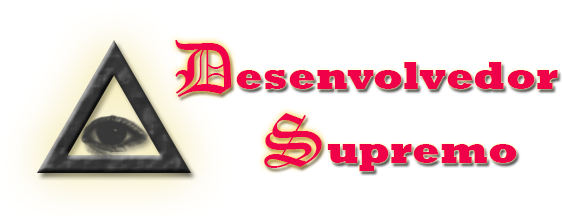
<style>
.page{position:relative;width:562px;height:221px;background:#ffffff}
.page>*{position:absolute;margin:0}
.t1{font:73.3px "OldEnglishTextMT";color:#ef0048}
.t2{font:40px "Rockwell-ExtraBold";color:#ef0048}
</style>
<div class="page">
<p class="t1" style="left:175px;top:40px;width:57px;height:57px">D</p>
<p class="t2" style="left:236px;top:62px;width:322px;height:27px">esenvolvedor</p>
<p class="t1" style="left:264px;top:113px;width:58px;height:55px">S</p>
<p class="t2" style="left:327px;top:144px;width:190px;height:27px">upremo</p>
</div>
